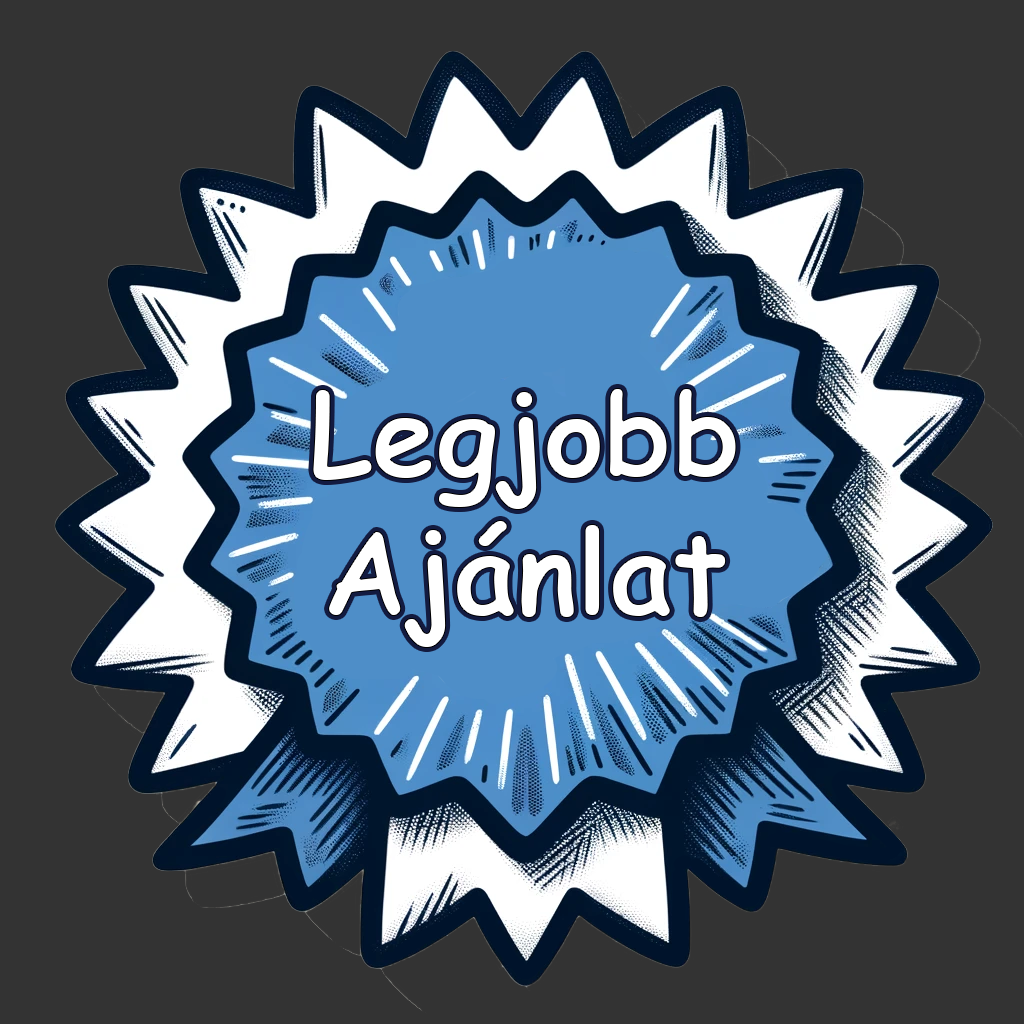
<style>
.page{position:relative;width:1024px;height:1024px;background:#333333}
.page>*{position:absolute;margin:0}
.t1{font:115px "ComicSansMS-Bold";color:#ffffff}
</style>
<div class="page">
<p class="t1" style="left:312px;top:388px;width:425px;height:260px;text-align:center">Legjobb<br>Ajánlat</p>
</div>
